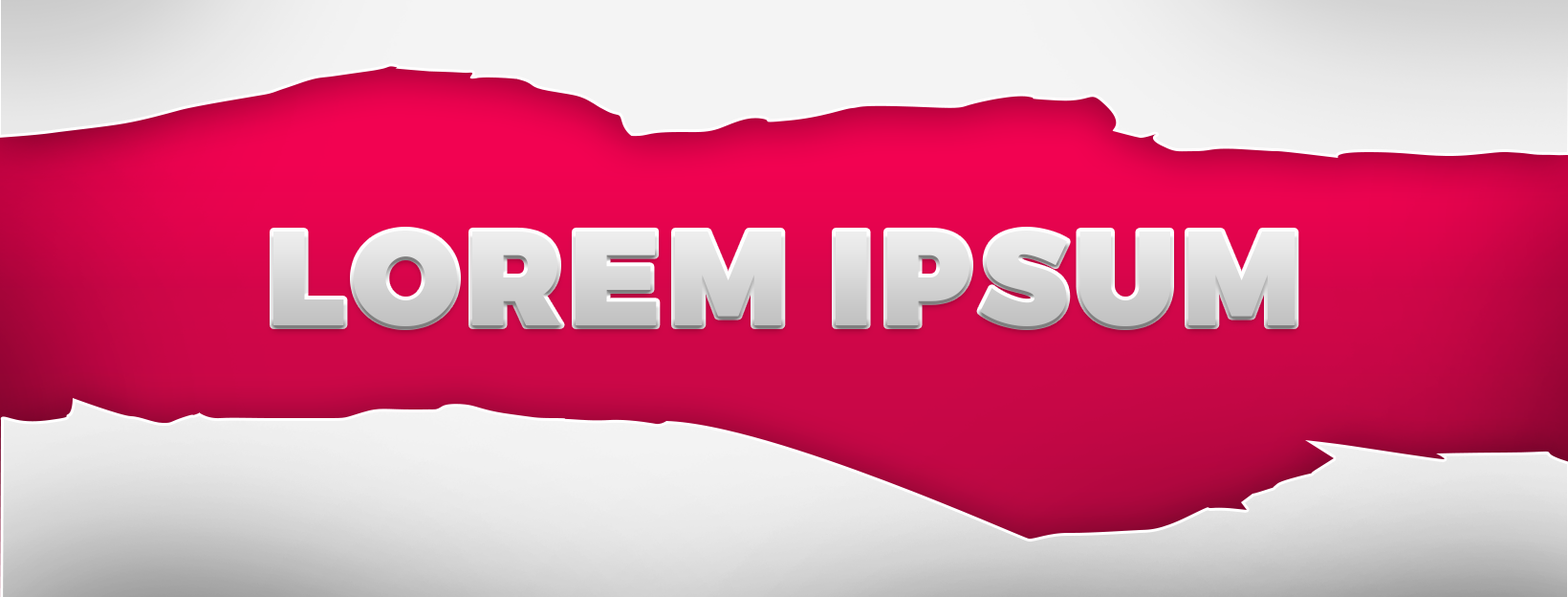
<style>
.page{position:relative;width:1568px;height:597px}
.page>*{position:absolute;margin:0}
.t1{font:133.9px "Montserrat-Black";letter-spacing:0.05em;color:#d7d7d7;text-transform:uppercase}
</style>
<div class="page">
<p class="t1" style="left:273px;top:230px;width:1023px;height:96px">Lorem Ipsum</p>
</div>
